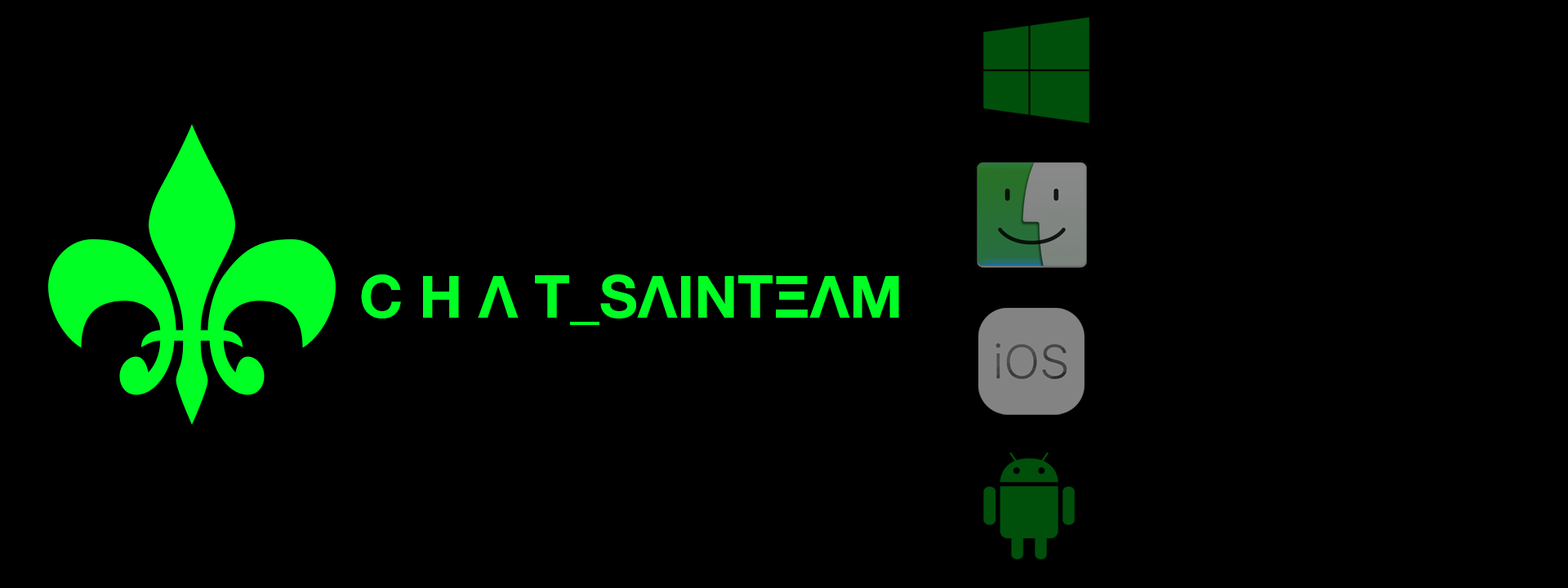
<style>
.page{position:relative;width:1568px;height:588px;background:#000000}
.page>*{position:absolute;margin:0}
.t1{font:58.8px "HelveticaNeue-Bold";color:#00ff24}
</style>
<div class="page">
<p class="t1" style="left:361px;top:274px;width:538px;height:51px">C H Λ T_SΛINTΞΛM</p>
</div>
